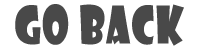
<style>
.page{position:relative;width:200px;height:49px;background:#ffffff}
.page>*{position:absolute;margin:0}
.t1{font:50.5px "ShowcardGothic-Reg";letter-spacing:0.04em;color:#494949;scale:0.76 1}
</style>
<div class="page">
<p class="t1" style="left:15px;top:4px;width:169px;height:42px">gO BACK</p>
</div>
